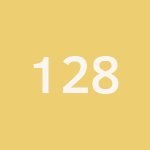
<style>
.page{position:relative;width:150px;height:150px;background:#edcf72}
.page>*{position:absolute;margin:0}
.t1{font:52.9px "ClearSans-Medium";color:#f9f6f2}
</style>
<div class="page">
<p class="t1" style="left:33px;top:56px;width:86px;height:38px">128</p>
</div>
